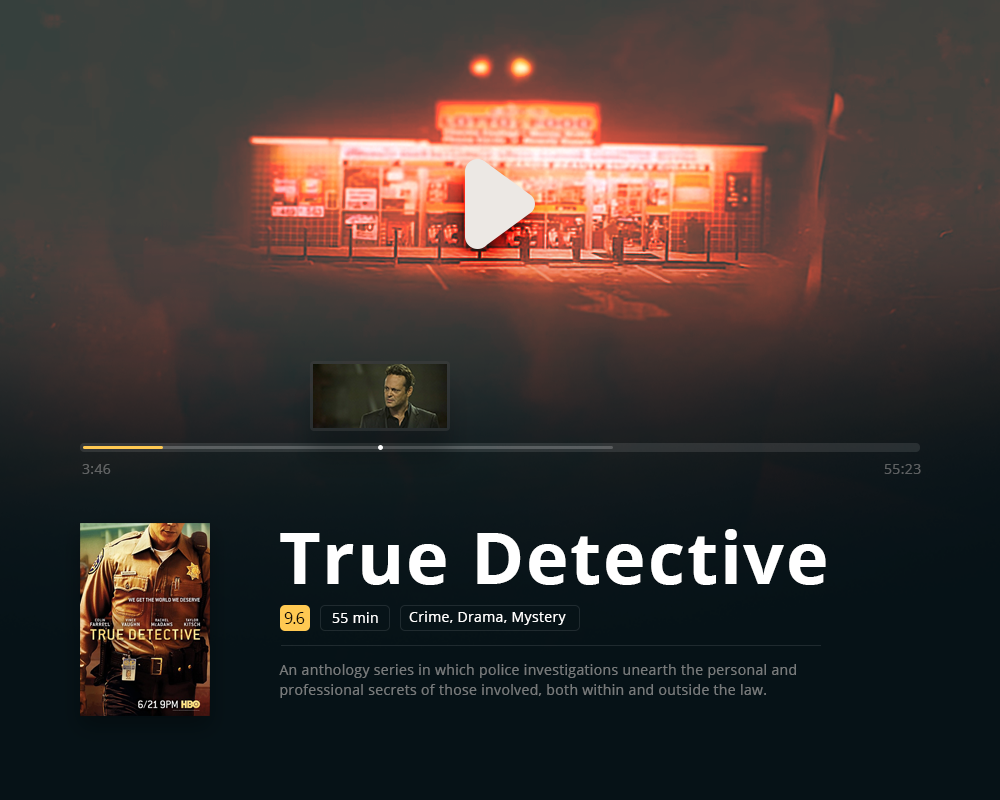
<style>
.page{position:relative;width:1000px;height:800px}
.page>*{position:absolute;margin:0}
.t1{font:14px "OpenSans";letter-spacing:0.025em;color:#616364}
.t2{font:14px "OpenSans";letter-spacing:0.025em;color:#5d6062}
.t3{font:72px "OpenSans-Bold";letter-spacing:0.025em;color:#ffffff}
.t4{font:16px "OpenSans";letter-spacing:-0.05em;color:#100d08}
.t5{font:14px "OpenSans";letter-spacing:0.025em;color:#ffffff}
.t6{font:14px/20px "OpenSans";letter-spacing:0.025em;color:#777a7b}
</style>
<div class="page">
<p class="t1" style="left:82px;top:464px;width:29px;height:10px">3:46</p>
<p class="t2" style="left:884px;top:464px;width:37px;height:10px">55:23</p>
<p class="t3" style="left:280px;top:529px;width:546px;height:56px">True Detective</p>
<p class="t4" style="left:284px;top:612px;width:21px;height:12px">9.6</p>
<p class="t5" style="left:332px;top:612px;width:46px;height:11px">55 min</p>
<p class="t5" style="left:409px;top:611px;width:157px;height:14px">Crime, Drama, Mystery</p>
<p class="t6" style="left:279px;top:664px;width:517px;height:34px">An anthology series in which police investigations unearth the personal and professional secrets of those involved, both within and outside the law.</p>
</div>
